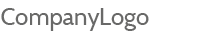
<style>
.page{position:relative;width:200px;height:35px;background:#ffffff}
.page>*{position:absolute;margin:0}
.t1{font:24px "Cabin-Regular";color:#696968}
</style>
<div class="page">
<p class="t1" style="left:1px;top:8px;width:148px;height:23px">CompanyLogo</p>
</div>
